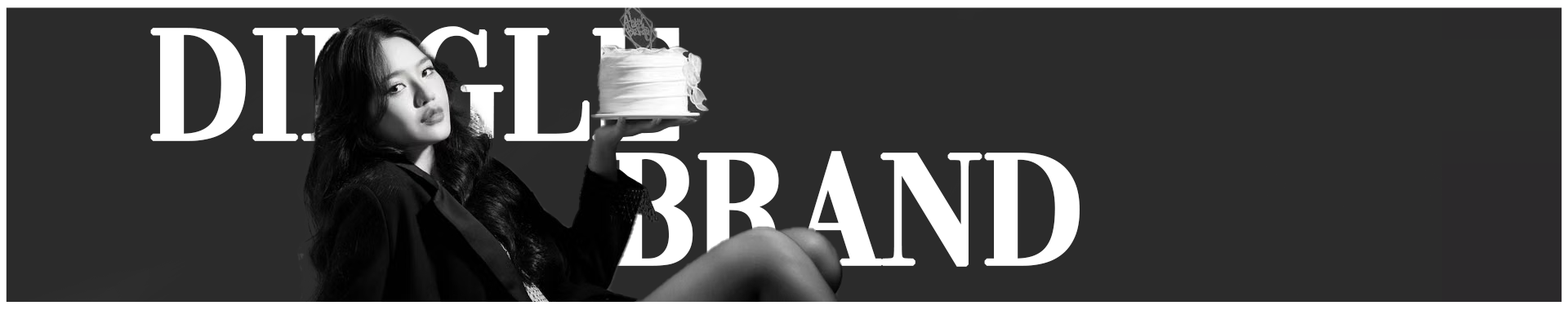
<style>
.page{position:relative;width:1568px;height:310px;background:#2b2b2b}
.page>*{position:absolute;margin:0}
.t1{font:163.3px "Vogue-Regular";letter-spacing:-0.025em;color:#ffffff;font-weight:bold}
</style>
<div class="page">
<p class="t1" style="left:150px;top:26px;width:529px;height:117px">Dingle</p>
<p class="t1" style="left:610px;top:151px;width:470px;height:116px">brand</p>
</div>
